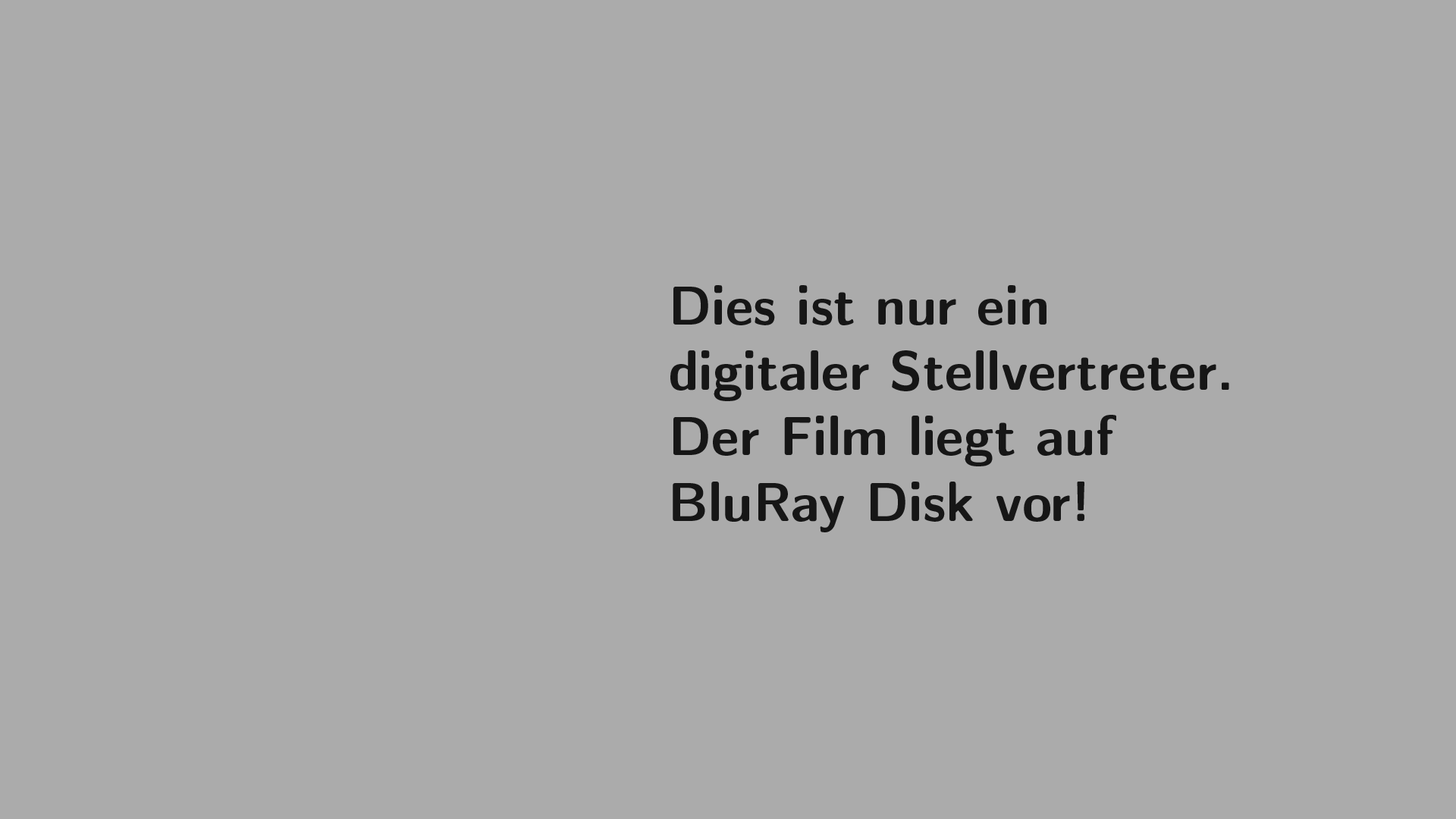
<style>
.page{position:relative;width:1456px;height:819px;background:#ababab}
.page>*{position:absolute;margin:0}
.t1{font:54.6px "CMUSansSerif-Bold";color:#161616}
</style>
<div class="page">
<p class="t1" style="left:670px;top:285px;width:559px;height:247px">Dies ist nur ein <br>digitaler Stellvertreter.<br>Der Film liegt auf <br>BluRay Disk vor!</p>
</div>
